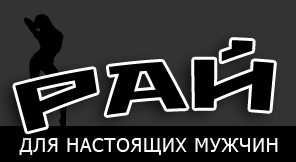
<style>
.page{position:relative;width:296px;height:162px;background:#333333}
.page>*{position:absolute;margin:0}
.t1{font:68.1px "Metro";letter-spacing:0.04em;color:#000000;text-transform:uppercase}
.t2{font:19.1px "Tahoma";letter-spacing:0.04em;color:#ffffff;text-transform:uppercase}
</style>
<div class="page">
<p class="t1" style="left:15px;top:40px;width:259px;height:92px;rotate:-5deg">РАЙ</p>
<p class="t2" style="left:19px;top:138px;width:259px;height:17px">для настоящих мужчин</p>
</div>
